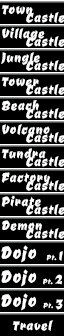
<style>
.page{position:relative;width:64px;height:336px;background:#000000}
.page>*{position:absolute;margin:0}
.t1{font:18px "CevicheOne-Regular";letter-spacing:0.06em;color:#ffffff;scale:0.83 1}
.t2{font:24px "CevicheOne-Regular";letter-spacing:0.06em;color:#ffffff;scale:0.83 1}
.t3{font:10px "CevicheOne-Regular";letter-spacing:0.06em;color:#ffffff;scale:0.83 1}
</style>
<div class="page">
<p class="t1" style="left:1px;top:5px;width:32px;height:10px">Town</p>
<p class="t1" style="left:26px;top:12px;width:39px;height:11px">Castle</p>
<p class="t1" style="left:2px;top:27px;width:43px;height:14px">Village</p>
<p class="t1" style="left:26px;top:36px;width:39px;height:11px">Castle</p>
<p class="t1" style="left:1px;top:52px;width:39px;height:13px">Jungle</p>
<p class="t1" style="left:26px;top:60px;width:39px;height:11px">Castle</p>
<p class="t1" style="left:1px;top:77px;width:38px;height:10px">Tower</p>
<p class="t1" style="left:26px;top:84px;width:39px;height:11px">Castle</p>
<p class="t1" style="left:1px;top:100px;width:38px;height:11px">Beach</p>
<p class="t1" style="left:26px;top:108px;width:39px;height:11px">Castle</p>
<p class="t1" style="left:2px;top:124px;width:48px;height:11px">Volcano</p>
<p class="t1" style="left:26px;top:132px;width:39px;height:11px">Castle</p>
<p class="t1" style="left:1px;top:148px;width:45px;height:11px">Tundra</p>
<p class="t1" style="left:26px;top:156px;width:39px;height:11px">Castle</p>
<p class="t1" style="left:1px;top:172px;width:49px;height:13px">Factory</p>
<p class="t1" style="left:26px;top:180px;width:39px;height:11px">Castle</p>
<p class="t1" style="left:1px;top:195px;width:40px;height:12px">Pirate</p>
<p class="t1" style="left:26px;top:204px;width:39px;height:11px">Castle</p>
<p class="t1" style="left:2px;top:220px;width:40px;height:11px">Demon</p>
<p class="t1" style="left:26px;top:228px;width:39px;height:11px">Castle</p>
<p class="t2" style="left:1px;top:245px;width:36px;height:18px">Dojo</p>
<p class="t3" style="left:46px;top:251px;width:17px;height:10px">Pt. <span class="t1">1</span></p>
<p class="t2" style="left:1px;top:269px;width:36px;height:18px">Dojo</p>
<p class="t3" style="left:43px;top:274px;width:19px;height:11px">Pt. <span class="t1">2</span></p>
<p class="t2" style="left:1px;top:293px;width:36px;height:18px">Dojo</p>
<p class="t3" style="left:43px;top:299px;width:20px;height:11px">Pt. <span class="t1">3</span></p>
<p class="t1" style="left:12px;top:320px;width:41px;height:11px">Travel</p>
</div>
